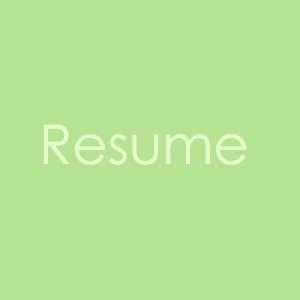
<style>
.page{position:relative;width:300px;height:300px;background:#b8e295}
.page>*{position:absolute;margin:0}
.t1{font:54.7px "CenturyGothic";color:#e2ffc9}
</style>
<div class="page">
<p class="t1" style="left:43px;top:124px;width:204px;height:41px">Resume</p>
</div>
